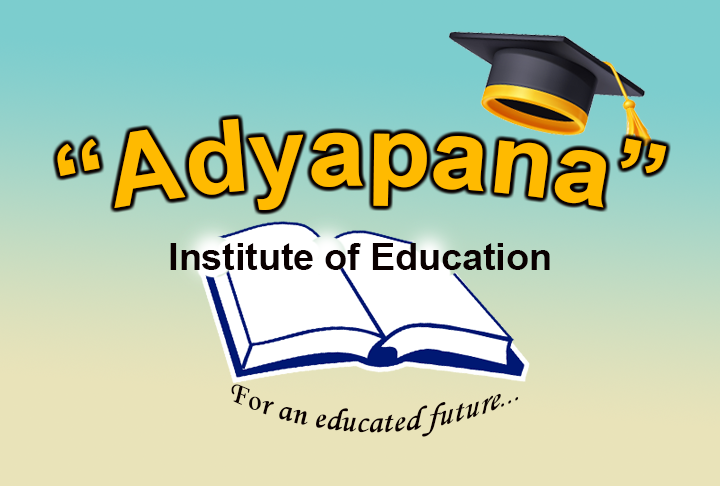
<style>
.page{position:relative;width:720px;height:486px}
.page>*{position:absolute;margin:0}
.t1{font:100px "Arial-BoldMT";color:#ffba00}
.t2{font:37.5px "Arial-BoldMT";color:#0a0000}
.t3{font:33.3px "MonotypeCorsiva";color:#0a0000}
</style>
<div class="page">
<p class="t1" style="left:57px;top:118px;width:610px;height:92px">“Adyapana”</p>
<p class="t2" style="left:170px;top:243px;width:380px;height:27px">Institute of Education</p>
<p class="t3" style="left:231px;top:384px;width:288px;height:53px">For an educated future...</p>
</div>
